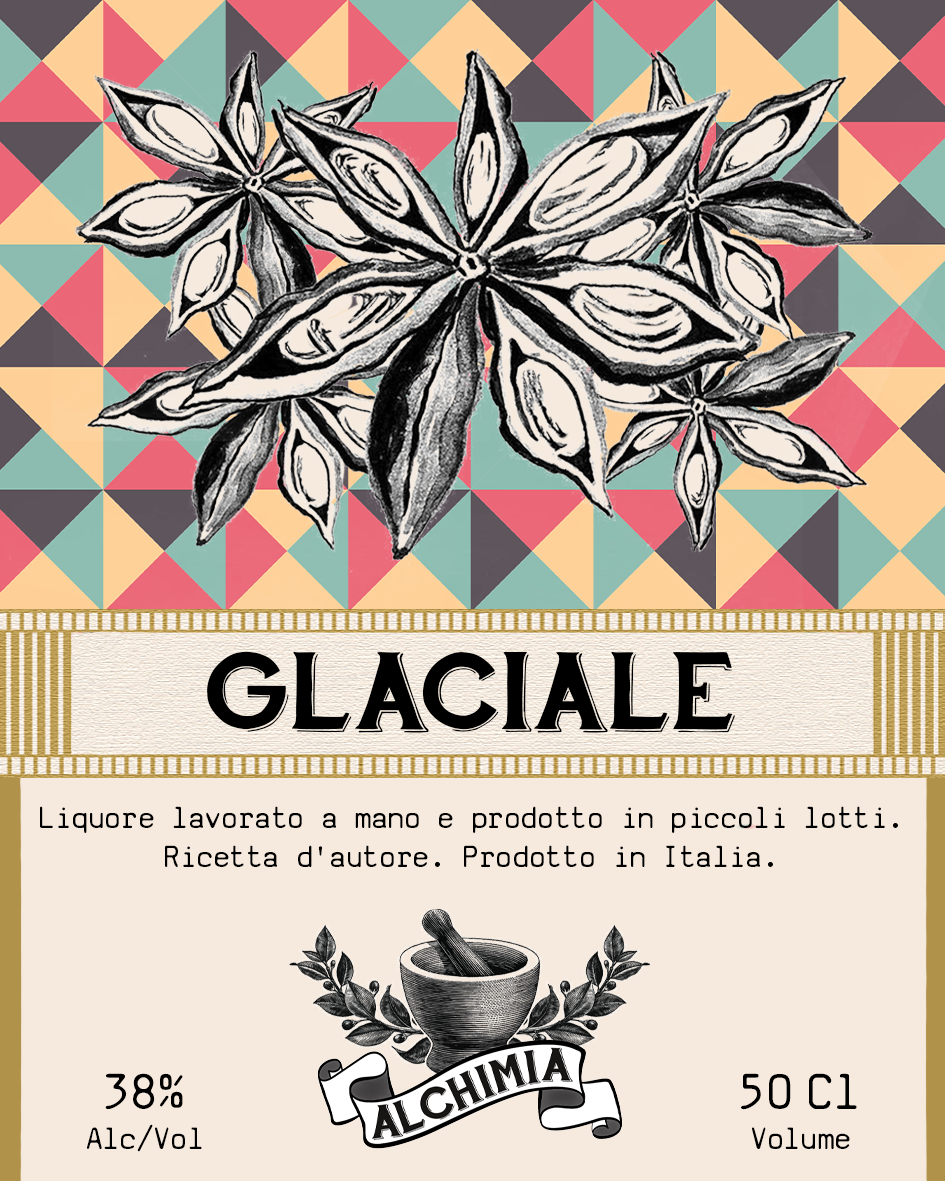
<style>
.page{position:relative;width:945px;height:1181px;background:#f6eade}
.page>*{position:absolute;margin:0}
.t1{font:110.4px "HandShopTypographyC30_demo";color:#000000}
.t2{font:32.9px "SVBasicManual";color:#000000}
.t3{font:33.3px "SVBasicManual";color:#000000}
.t4{font:54.2px "SVBasicManual";color:#000000}
</style>
<div class="page">
<p class="t1" style="left:207px;top:651px;width:528px;height:82px">GLACIALE</p>
<p class="t2" style="left:40px;top:806px;width:858px;height:61px;text-align:center">Liquore lavorato a mano e prodotto in piccoli lotti. <br>Ricetta d'autore. Prodotto in Italia.</p>
<p class="t3" style="left:87px;top:1073px;width:115px;height:79px;text-align:center"><span class="t4">38% <br></span>Alc/Vol</p>
<p class="t3" style="left:741px;top:1073px;width:116px;height:76px;text-align:center"><span class="t4">50 Cl<br></span>Volume</p>
</div>
